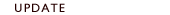
<style>
.page{position:relative;width:170px;height:15px;background:#ffffff}
.page>*{position:absolute;margin:0}
.t1{font:12px "GillSans";letter-spacing:0.1em;color:#250000}
</style>
<div class="page">
<p class="t1" style="left:15px;top:3px;width:50px;height:9px">UPDATE</p>
</div>
